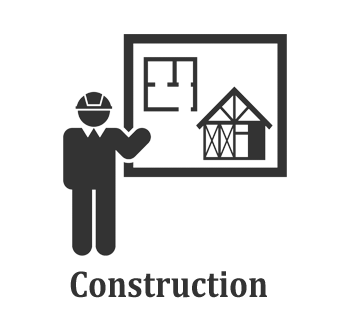
<style>
.page{position:relative;width:351px;height:324px;background:#ffffff}
.page>*{position:absolute;margin:0}
.t1{font:38px "Cambria-Bold";color:#333333;scale:0.88 1}
</style>
<div class="page">
<p class="t1" style="left:70px;top:271px;width:197px;height:27px">Construction</p>
</div>
